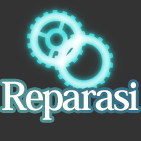
<style>
.page{position:relative;width:141px;height:141px;background:#333333}
.page>*{position:absolute;margin:0}
.t1{font:40px "HeiseiMinStd-W7";letter-spacing:-0.04em;color:#fffef9}
</style>
<div class="page">
<p class="t1" style="left:2px;top:81px;width:137px;height:39px">Reparasi</p>
</div>
